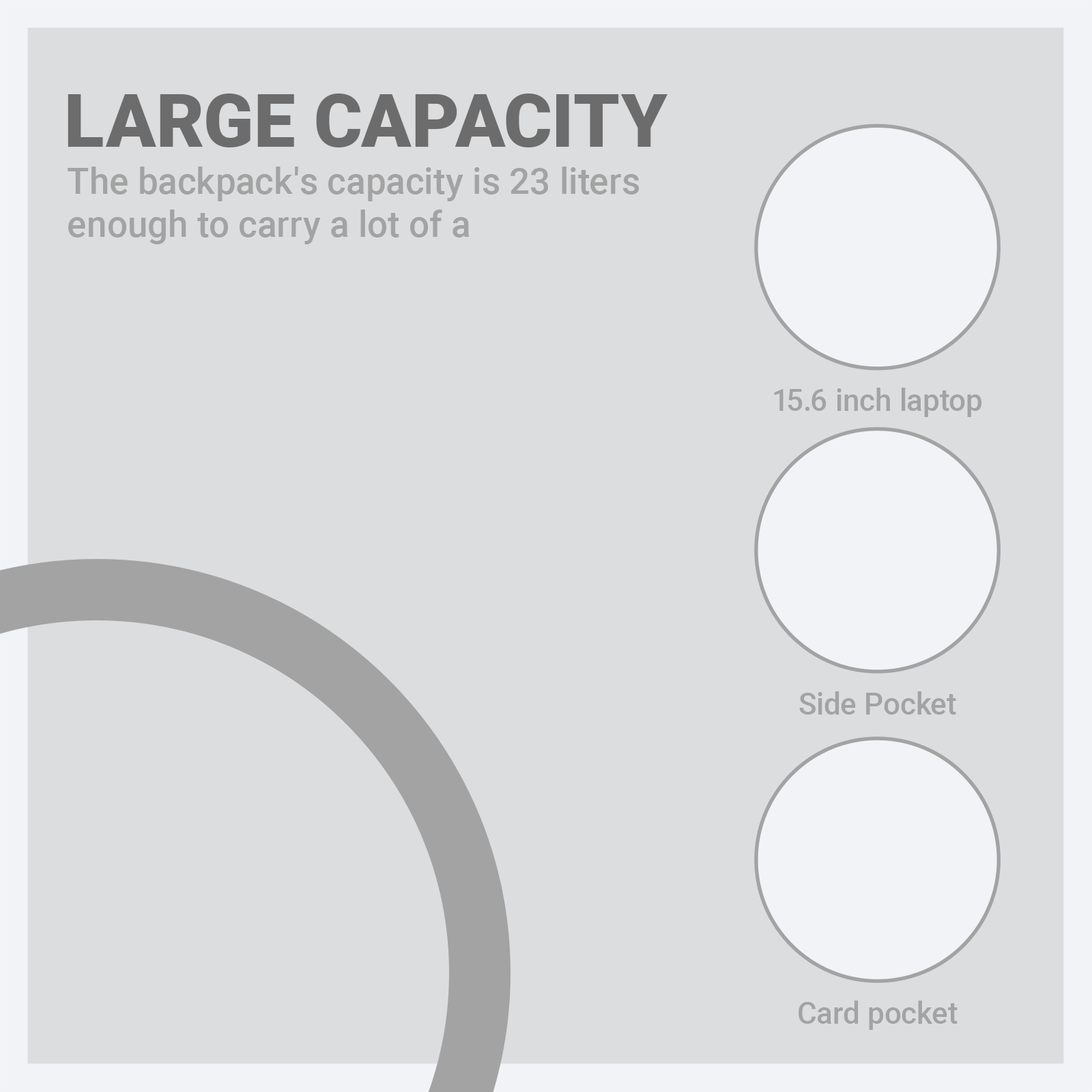
<style>
.page{position:relative;width:1092px;height:1092px;background:#dcdddf}
.page>*{position:absolute;margin:0}
.t1{font:74px "Roboto-Black";color:#6c6c6c}
.t2{font:36.2px "Roboto-Medium";color:#a3a3a3}
.t3{font:30.4px "Roboto-Medium";color:#a3a3a3}
</style>
<div class="page">
<p class="t1" style="left:68px;top:94px;width:600px;height:53px">LARGE CAPACITY</p>
<p class="t2" style="left:68px;top:167px;width:571px;height:77px">The backpack's capacity is 23 liters<br>enough to carry a lot of a</p>
<p class="t3" style="left:774px;top:388px;width:207px;height:29px">15.6 inch laptop</p>
<p class="t3" style="left:799px;top:691px;width:157px;height:24px">Side Pocket</p>
<p class="t3" style="left:799px;top:1001px;width:159px;height:29px">Card pocket</p>
</div>
